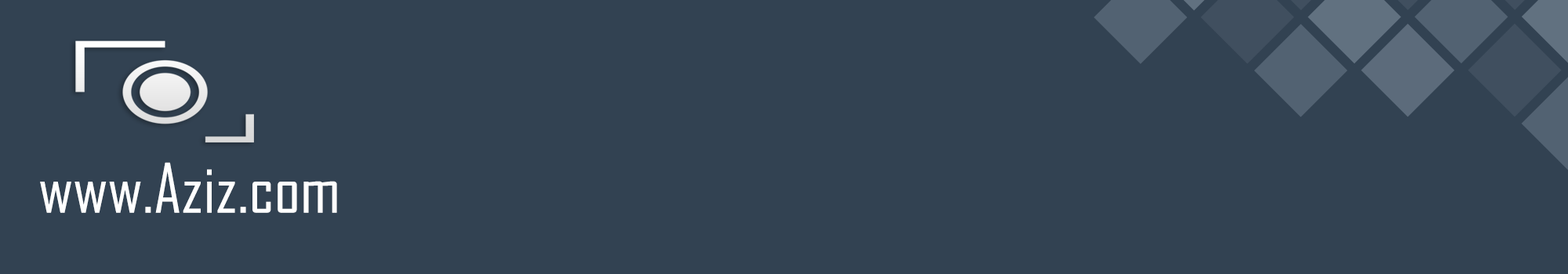
<style>
.page{position:relative;width:1568px;height:274px;background:#324252}
.page>*{position:absolute;margin:0}
.t1{font:65.3px "AgencyFB-Reg";color:#ffffff;scale:1.05 1}
</style>
<div class="page">
<p class="t1" style="left:40px;top:162px;width:297px;height:51px">www.Aziz.com</p>
</div>
